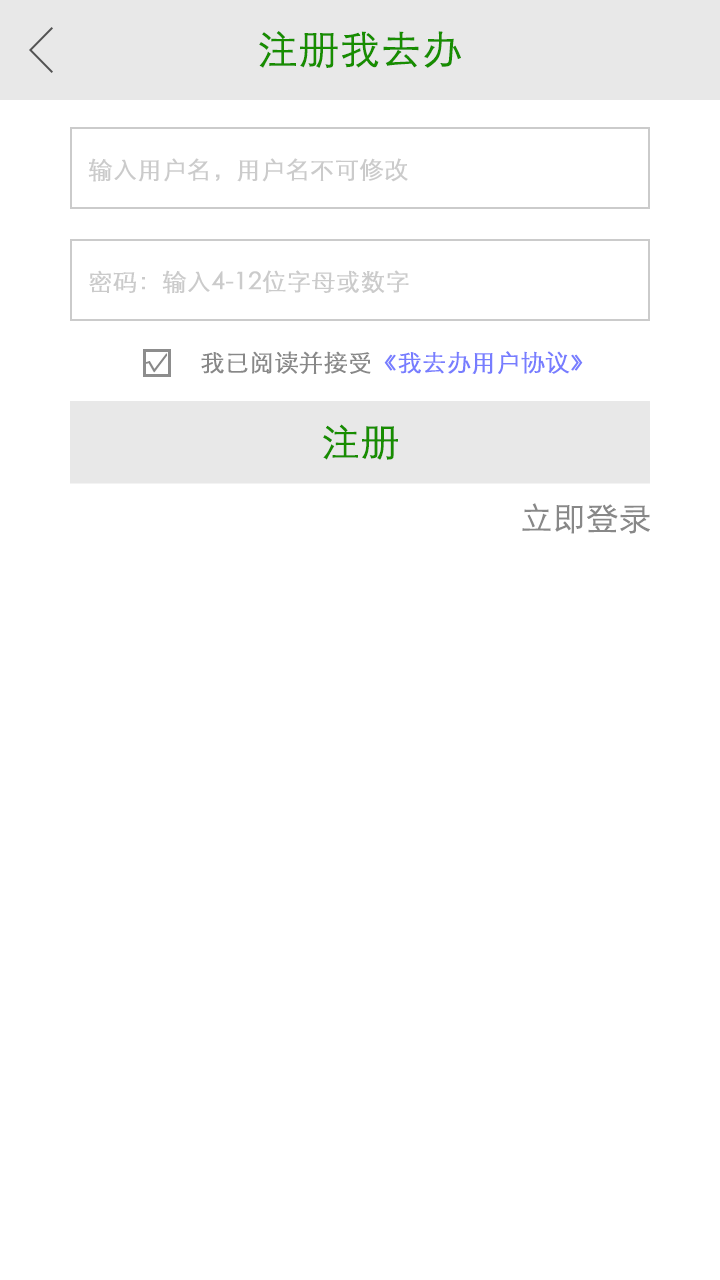
<style>
.page{position:relative;width:720px;height:1280px;background:#ffffff}
.page>*{position:absolute;margin:0}
.t1{font:40px "STXihei";color:#178d00;font-weight:bold}
.t2{font:24px "STXihei";color:#cbcbcb;font-weight:bold}
.t3{font:24px "STXihei";color:#777dff;font-weight:bold}
.t4{font:22px "STXihei";color:#888888;font-weight:bold}
.t5{font:24px "STXihei";color:#888888;font-weight:bold}
.t6{font:38px "STXihei";color:#178d00;font-weight:bold}
.t7{font:32px "STXihei";color:#888888;font-weight:bold}
</style>
<div class="page">
<p class="t1" style="left:259px;top:31px;width:202px;height:37px">注册我去办</p>
<p class="t2" style="left:88px;top:158px;width:320px;height:24px">输入用户名，用户名不可修改</p>
<p class="t2" style="left:89px;top:270px;width:320px;height:24px">密码：输入4-12位字母或数字</p>
<p class="t3" style="left:145px;top:351px;width:438px;height:23px"><span class="t4">√</span><span class="t5">     我已阅读并接受</span>《我去办用户协议》</p>
<p class="t6" style="left:323px;top:424px;width:75px;height:36px">注册</p>
<p class="t7" style="left:522px;top:503px;width:128px;height:31px">立即登录</p>
</div>
